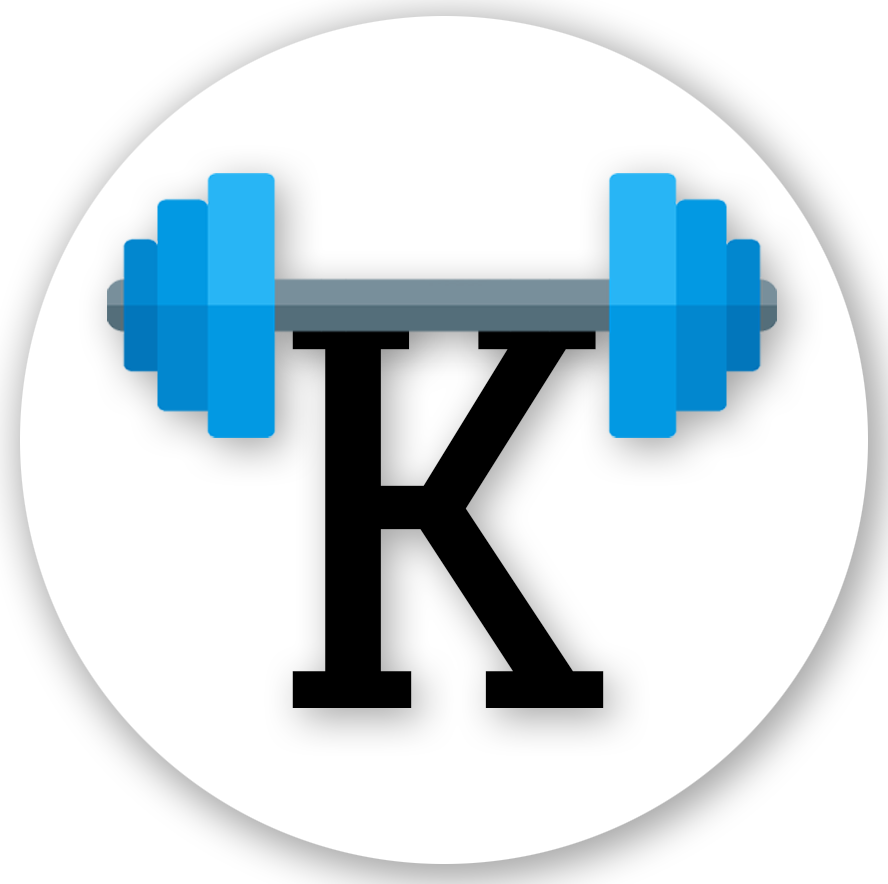
<style>
.page{position:relative;width:888px;height:884px;background:#ffffff}
.page>*{position:absolute;margin:0}
.t1{font:542.1px "Glegoo-Bold";color:#000000}
</style>
<div class="page">
<p class="t1" style="left:292px;top:312px;width:312px;height:396px">K</p>
</div>
